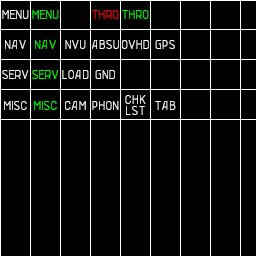
<style>
.page{position:relative;width:256px;height:256px;background:#000000}
.page>*{position:absolute;margin:0}
.t1{font:14px "LENYA69";letter-spacing:-0.025em;color:#ffffff}
.t2{font:14px "LENYA69";letter-spacing:-0.025em;color:#00ff00}
.t3{font:14px "LENYA69";letter-spacing:-0.025em;color:#ff0101}
.t4{font:14px "LENYA69";letter-spacing:-0.025em;color:#fefefe}
.t5{font:14px/11px "LENYA69";color:#fefefe}
</style>
<div class="page">
<p class="t1" style="left:2px;top:10px;width:27px;height:9px">MENU</p>
<p class="t2" style="left:32px;top:10px;width:27px;height:9px">MENU</p>
<p class="t3" style="left:92px;top:10px;width:27px;height:9px">THRO</p>
<p class="t2" style="left:122px;top:10px;width:27px;height:9px">THRO</p>
<p class="t1" style="left:5px;top:40px;width:21px;height:9px">NAV</p>
<p class="t2" style="left:35px;top:40px;width:21px;height:9px">NAV</p>
<p class="t4" style="left:65px;top:40px;width:21px;height:9px">NVU</p>
<p class="t1" style="left:92px;top:40px;width:27px;height:9px">ABSU</p>
<p class="t1" style="left:122px;top:40px;width:27px;height:9px">OVHD</p>
<p class="t1" style="left:155px;top:40px;width:20px;height:9px">GPS</p>
<p class="t1" style="left:2px;top:70px;width:27px;height:9px">SERV</p>
<p class="t2" style="left:32px;top:70px;width:27px;height:9px">SERV</p>
<p class="t1" style="left:62px;top:70px;width:27px;height:9px">LOAD</p>
<p class="t1" style="left:95px;top:70px;width:20px;height:9px">GND</p>
<p class="t1" style="left:4px;top:101px;width:23px;height:9px">MISC</p>
<p class="t2" style="left:34px;top:101px;width:23px;height:9px">MISC</p>
<p class="t4" style="left:65px;top:101px;width:21px;height:9px">CAM</p>
<p class="t1" style="left:92px;top:101px;width:27px;height:9px">PHON</p>
<p class="t5" style="left:125px;top:95px;width:21px;height:20px;text-align:center">CHK<br>LST</p>
<p class="t4" style="left:155px;top:101px;width:21px;height:9px">TAB</p>
</div>
